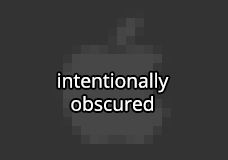
<style>
.page{position:relative;width:228px;height:160px;background:#333333}
.page>*{position:absolute;margin:0}
.t1{font:19.3px "OpenSans-Regular";color:#ffffff}
</style>
<div class="page">
<p class="t1" style="left:58px;top:72px;width:111px;height:39px;text-align:center">intentionally<br>obscured</p>
</div>
